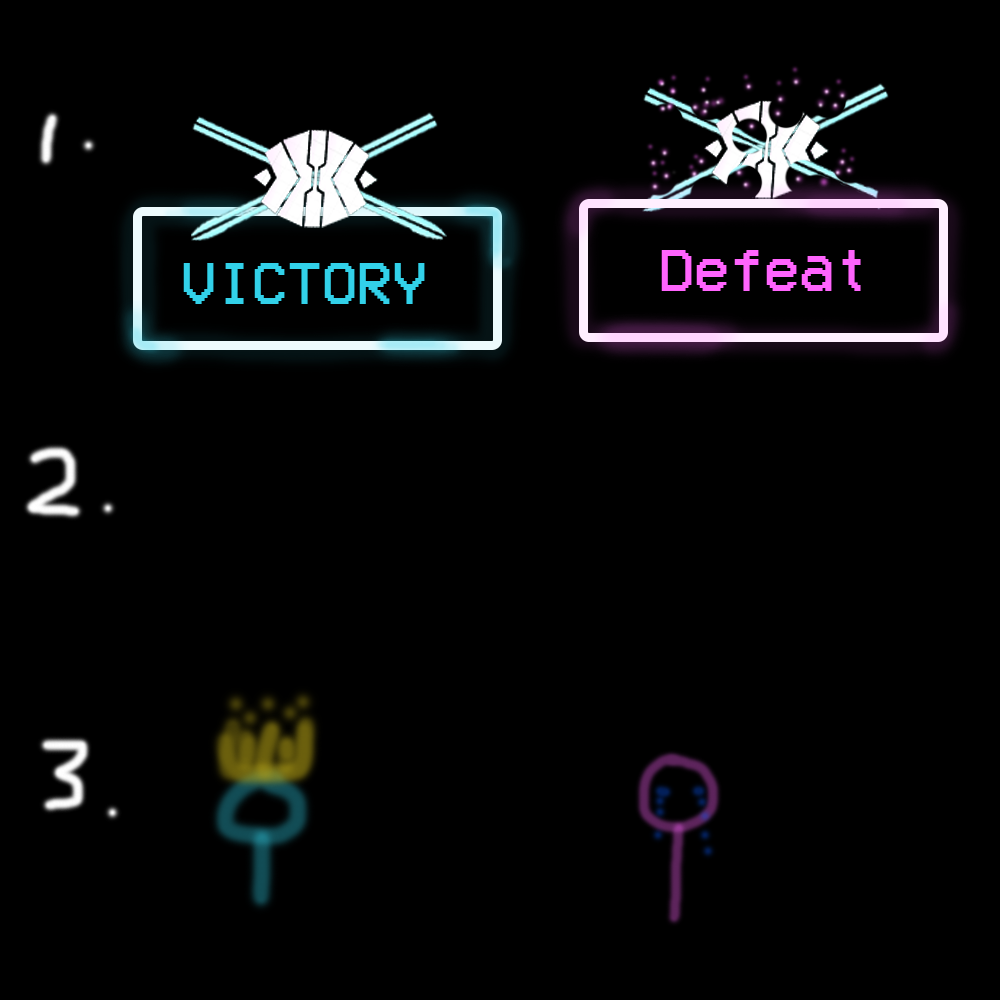
<style>
.page{position:relative;width:1000px;height:1000px;background:#000000}
.page>*{position:absolute;margin:0}
.t1{font:60px "VCROSDMono";color:#ff64fd}
.t2{font:60px "VCROSDMono";color:#32d1e9}
</style>
<div class="page">
<p class="t1" style="left:661px;top:250px;width:200px;height:41px">Defeat</p>
<p class="t2" style="left:183px;top:263px;width:242px;height:41px">VICTORY</p>
</div>
